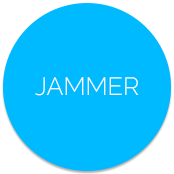
<style>
.page{position:relative;width:174px;height:174px;background:#00baff}
.page>*{position:absolute;margin:0}
.t1{font:25.1px "Raleway-Light";color:#ffffff;text-transform:uppercase}
</style>
<div class="page">
<p class="t1" style="left:35px;top:77px;width:104px;height:19px">Jammer</p>
</div>
